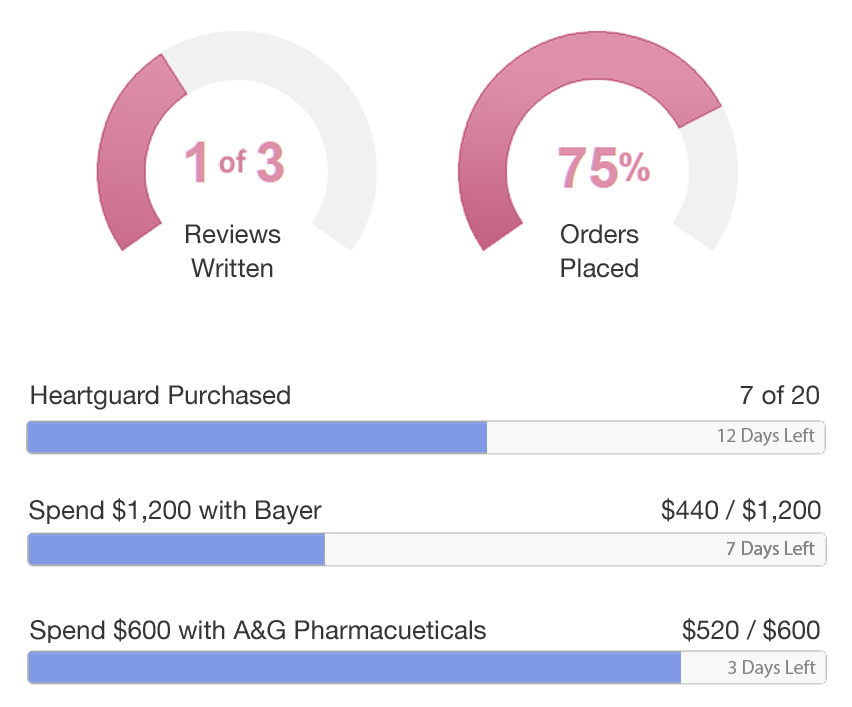
<style>
.page{position:relative;width:852px;height:707px;background:#ffffff}
.page>*{position:absolute;margin:0}
.t1{font:26px/33.6px "HelveticaNeue";color:#353535}
.t2{font:26px "HelveticaNeue";color:#353535}
.t3{font:19.6px "MyriadPro-Regular";color:#838383}
</style>
<div class="page">
<p class="t1" style="left:186px;top:224px;width:95px;height:54px;text-align:center">Reviews<br>Written</p>
<p class="t1" style="left:561px;top:224px;width:78px;height:54px;text-align:center">Orders<br>Placed</p>
<p class="t2" style="left:31px;top:385px;width:788px;height:25px">Heartguard Purchased                                                              7 of 20</p>
<p class="t3" style="left:718px;top:428px;width:97px;height:18px">12 Days Left</p>
<p class="t2" style="left:29px;top:498px;width:792px;height:27px">Spend $1,200 with Bayer                                               $440 / $1,200</p>
<p class="t3" style="left:727px;top:541px;width:88px;height:18px">7 Days Left</p>
<p class="t3" style="left:727px;top:541px;width:88px;height:18px">7 Days Left</p>
<p class="t2" style="left:30px;top:618px;width:790px;height:26px">Spend $600 with A&amp;G Pharmacueticals                           $520 / $600</p>
<p class="t3" style="left:728px;top:660px;width:88px;height:18px">3 Days Left</p>
</div>
